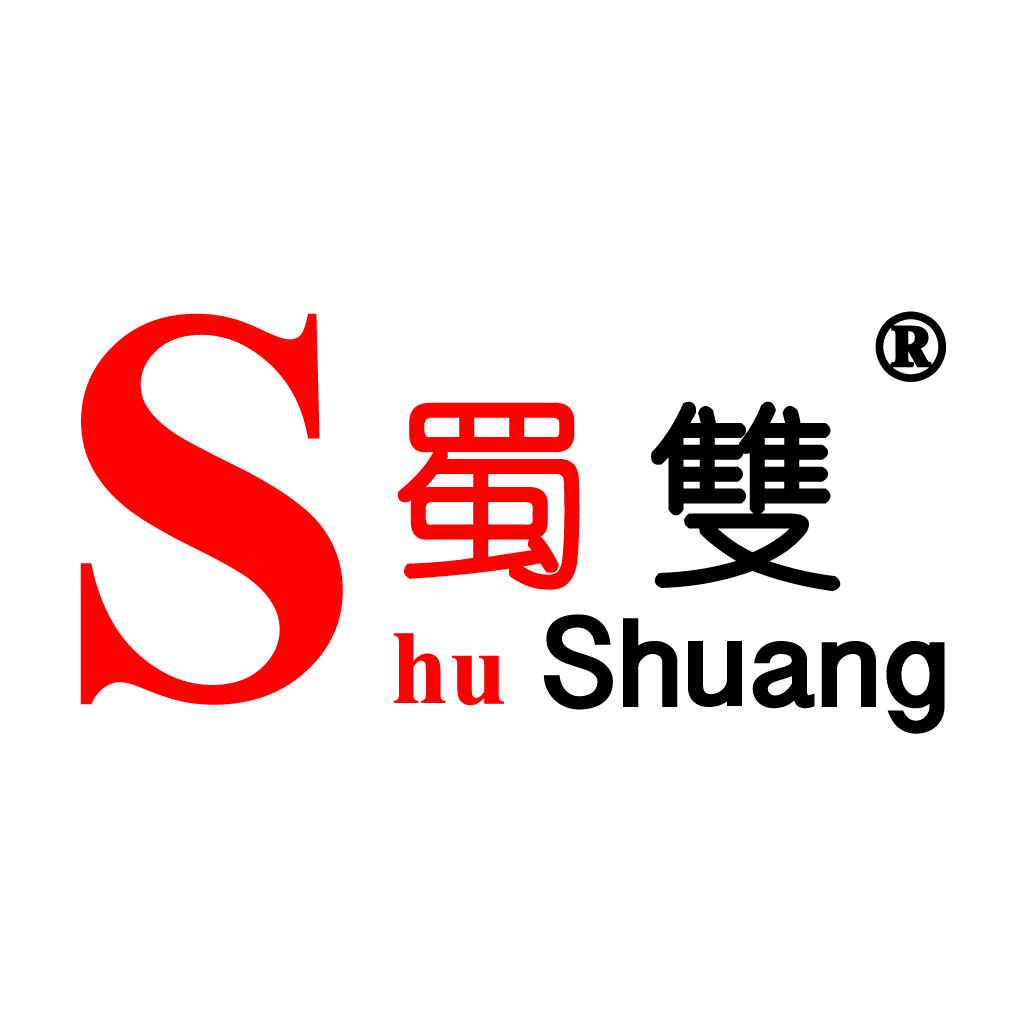
<style>
.page{position:relative;width:1024px;height:1024px;background:#ffffff}
.page>*{position:absolute;margin:0}
.t1{font:700px "Aparajita-Bold";color:#fe0101}
.t2{font:120px "Aparajita-Bold";color:#000000;font-weight:bold}
.t3{font:200px "-";color:#000000;font-weight:bold}
.t4{font:200px "-";color:#ff0000;font-weight:bold}
.t5{font:130px "InaiMathi-Bold";color:#000000}
.t6{font:130px "Aparajita-Bold";color:#ff0000}
</style>
<div class="page">
<p class="t1" style="left:80px;top:313px;width:263px;height:392px">S</p>
<p class="t2" style="left:875px;top:311px;width:71px;height:71px">®</p>
<p class="t3" style="left:651px;top:401px;width:190px;height:190px">雙</p>
<p class="t4" style="left:398px;top:402px;width:182px;height:188px">蜀</p>
<p class="t5" style="left:543px;top:614px;width:402px;height:120px">Shuang</p>
<p class="t6" style="left:393px;top:633px;width:53px;height:70px">h</p>
<p class="t6" style="left:452px;top:655px;width:52px;height:51px">u</p>
</div>
